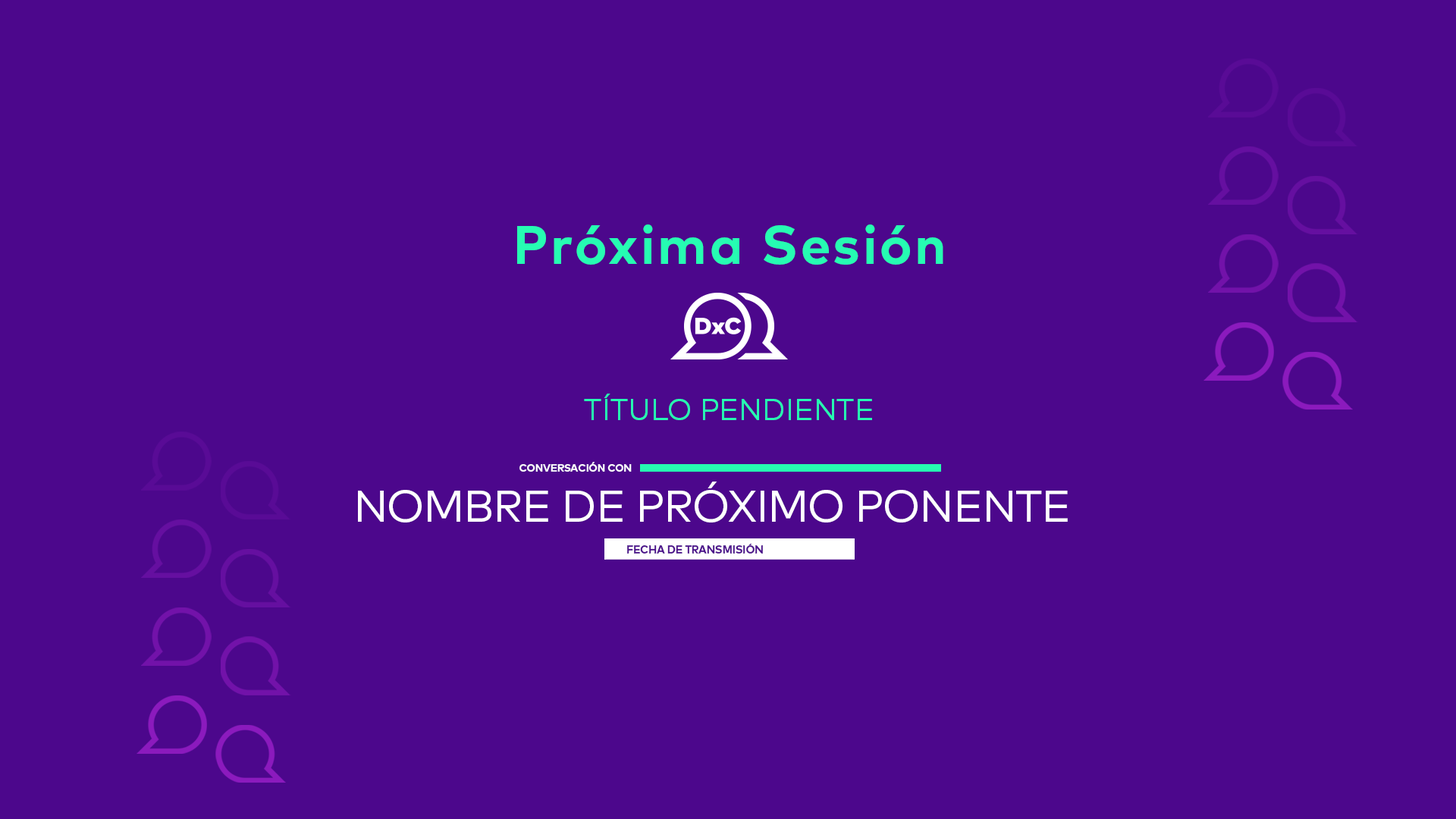
<style>
.page{position:relative;width:1456px;height:819px;background:#4c078c}
.page>*{position:absolute;margin:0}
.t1{font:53.8px "FFMarkPro-Bold";letter-spacing:0.05em;color:#26fcb2}
.t2{font:29.3px "FFMarkPro-Regular";color:#26fbb1;text-transform:uppercase}
.t3{font:10.6px "FFMarkPro-Bold";letter-spacing:-0.025em;color:#ffffff;text-transform:uppercase}
.t4{font:44.1px "FFMarkPro-Regular";letter-spacing:-0.025em;color:#ffffff}
.t5{font:11px "FFMarkPro-Bold";letter-spacing:-0.02em;color:#4d128c;text-transform:uppercase}
</style>
<div class="page">
<p class="t1" style="left:517px;top:224px;width:426px;height:41px">Próxima Sesión</p>
<p class="t2" style="left:584px;top:394px;width:288px;height:26px">TÍTULO PENDIENTE</p>
<p class="t3" style="left:519px;top:462px;width:113px;height:10px">conversación con</p>
<p class="t4" style="left:358px;top:482px;width:710px;height:40px">NOMBRE DE PRÓXIMO PONENTE</p>
<p class="t5" style="left:627px;top:544px;width:136px;height:10px">FECHA DE TRANSMISIÓN</p>
</div>
